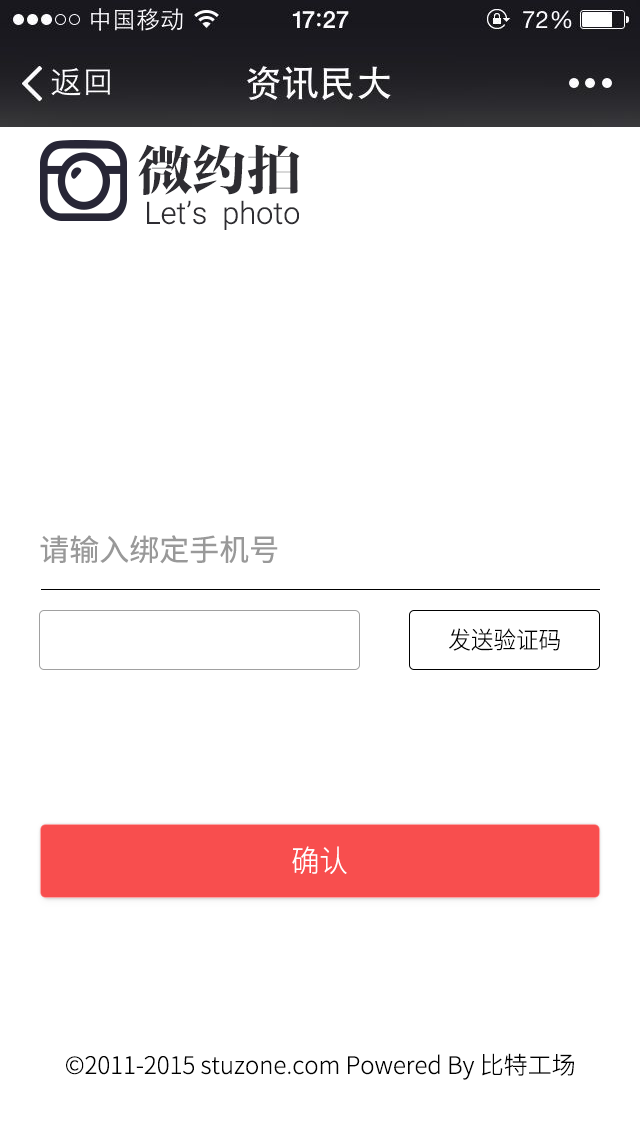
<style>
.page{position:relative;width:640px;height:1136px;background:#ffffff}
.page>*{position:absolute;margin:0}
.t1{font:54.5px "FZFYSJW--GB1-0";color:#2e2d32}
.t2{font:30.7px "Roboto-Light";color:#2e2d32}
.t3{font:30px "NotoSansHans-Regular";color:#999999}
.t4{font:24px "NotoSansHans-Light";color:#000000;scale:0.94 1}
.t5{font:30px "NotoSansHans-Light";color:#ffffff;scale:0.94 1}
.t6{font:24px "NotoSansHans-Light";color:#000000}
</style>
<div class="page">
<p class="t1" style="left:138px;top:144px;width:162px;height:51px">微约拍</p>
<p class="t2" style="left:147px;top:200px;width:152px;height:30px">Let’s  photo</p>
<p class="t3" style="left:40px;top:535px;width:238px;height:29px">请输入绑定手机号</p>
<p class="t4" style="left:449px;top:628px;width:111px;height:23px">发送验证码</p>
<p class="t5" style="left:292px;top:846px;width:55px;height:28px">确认</p>
<p class="t6" style="left:66px;top:1053px;width:508px;height:27px">©2011-2015 stuzone.com Powered By 比特工场</p>
</div>
